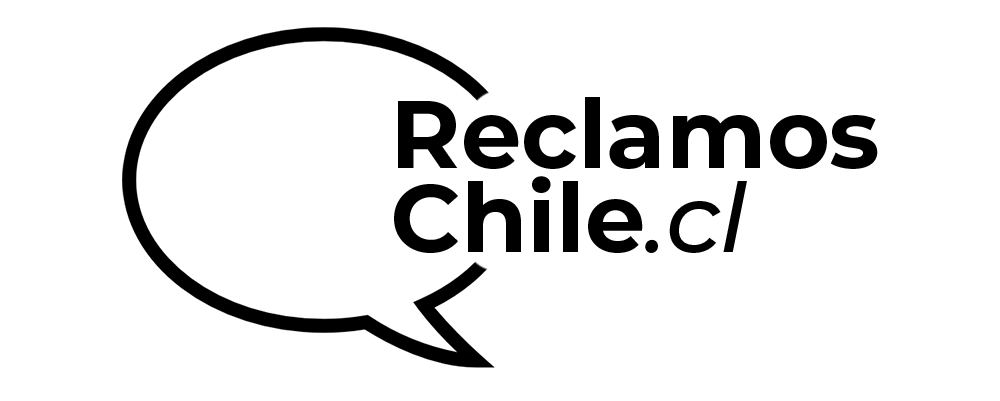
<style>
.page{position:relative;width:1000px;height:401px;background:#ffffff}
.page>*{position:absolute;margin:0}
.t1{font:95.8px "Montserrat-Bold";color:#000000}
.t2{font:95.8px "Montserrat-MediumItalic";color:#000000}
</style>
<div class="page">
<p class="t1" style="left:398px;top:97px;width:480px;height:72px">Reclamos</p>
<p class="t1" style="left:394px;top:176px;width:353px;height:77px">Chile<span class="t2">.cl</span></p>
</div>
